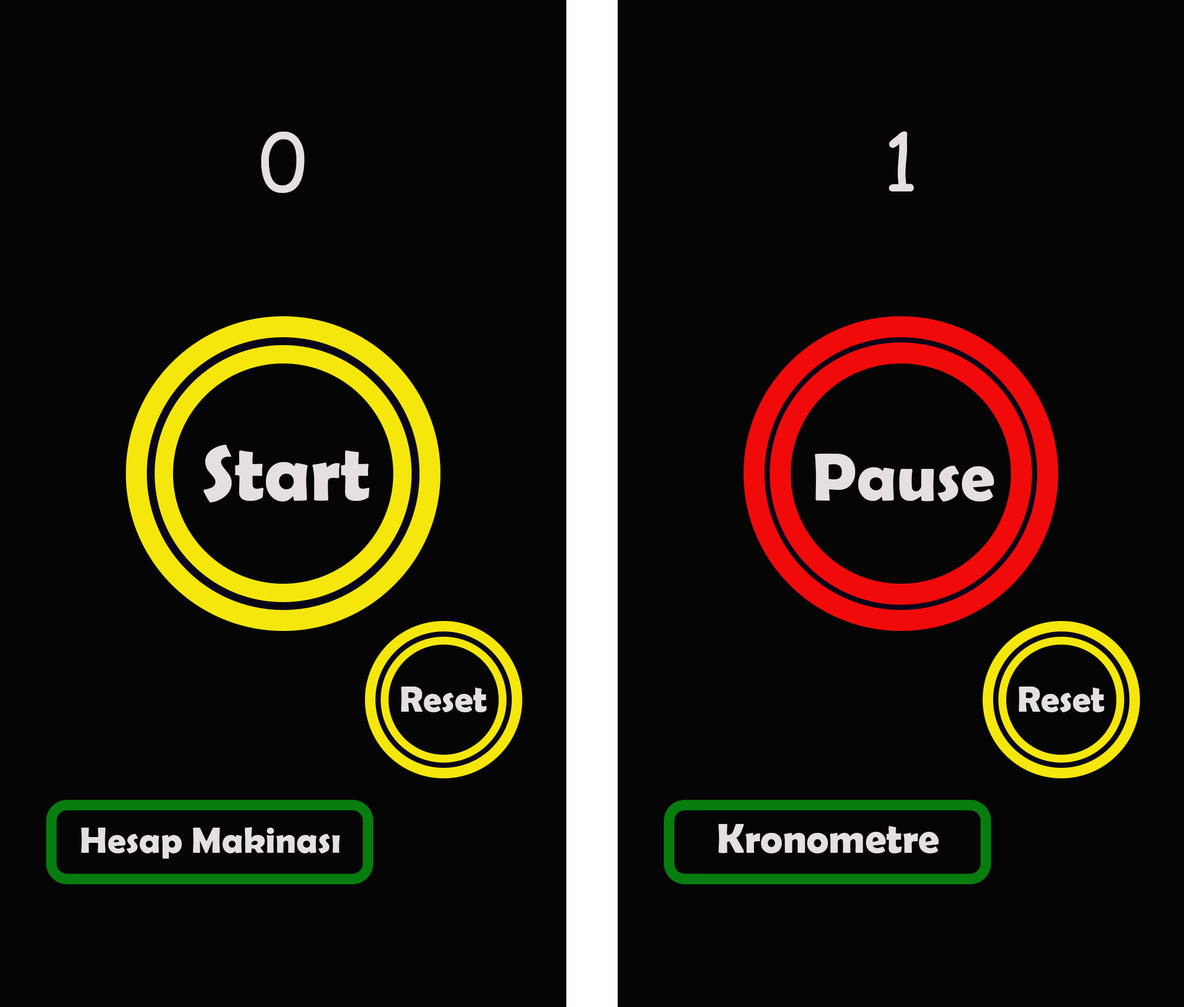
<style>
.page{position:relative;width:1184px;height:1007px;background:#050505}
.page>*{position:absolute;margin:0}
.t1{font:78.7px "ComicSansMS";color:#e5dfdf}
.t2{font:78.7px "BerlinSansFBDemi-Bold";color:#e5dfdf}
.t3{font:68.2px "BerlinSansFBDemi-Bold";color:#e5dfdf}
.t4{font:36.7px "BerlinSansFBDemi-Bold";color:#e5dfdf}
.t5{font:42px "BerlinSansFBDemi-Bold";color:#e5dfdf}
</style>
<div class="page">
<p class="t1" style="left:261px;top:132px;width:44px;height:61px">0</p>
<p class="t1" style="left:889px;top:131px;width:25px;height:60px">1</p>
<p class="t2" style="left:203px;top:445px;width:167px;height:57px">Start</p>
<p class="t3" style="left:815px;top:454px;width:179px;height:47px">Pause</p>
<p class="t4" style="left:401px;top:687px;width:86px;height:25px">Reset</p>
<p class="t4" style="left:1019px;top:687px;width:85px;height:25px">Reset</p>
<p class="t5" style="left:718px;top:824px;width:221px;height:29px">Kronometre</p>
</div>
